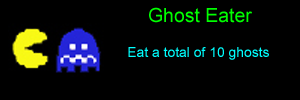
<style>
.page{position:relative;width:300px;height:100px;background:#000000}
.page>*{position:absolute;margin:0}
.t1{font:19.4px "ArialMT";color:#00ff00}
.t2{font:13.9px "ArialMT";color:#00ffff}
</style>
<div class="page">
<p class="t1" style="left:149px;top:7px;width:103px;height:16px">Ghost Eater</p>
<p class="t2" style="left:128px;top:47px;width:141px;height:13px">Eat a total of 10 ghosts</p>
</div>
